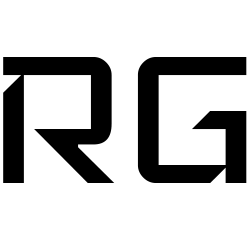
<style>
.page{position:relative;width:250px;height:250px;background:#ffffff}
.page>*{position:absolute;margin:0}
.t1{font:258.3px "Iceland-Regular";letter-spacing:-0.05em;color:#000000}
</style>
<div class="page">
<p class="t1" style="left:3px;top:57px;width:244px;height:126px">RG</p>
</div>
